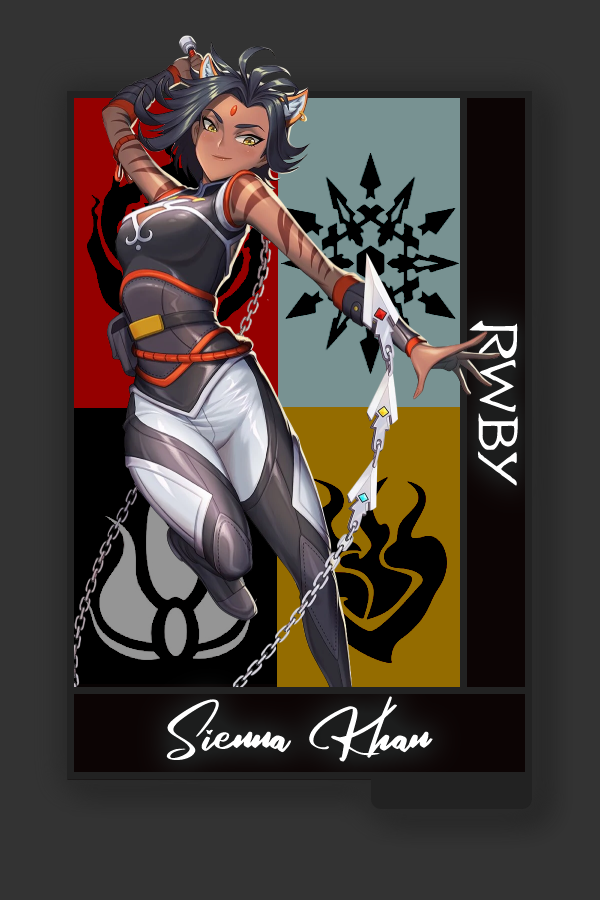
<style>
.page{position:relative;width:600px;height:900px;background:#333333}
.page>*{position:absolute;margin:0}
.t1{font:61.3px "RWBY_Style";color:#ffffff;scale:1.25 1}
.t2{font:76.6px "RosegaFREE";color:#ffffff;scale:0.91 1}
</style>
<div class="page">
<p class="t1" style="left:469px;top:320px;width:49px;height:166px;rotate:90deg">RWBY</p>
<p class="t2" style="left:156px;top:684px;width:277px;height:80px">Sienna Khan</p>
</div>
